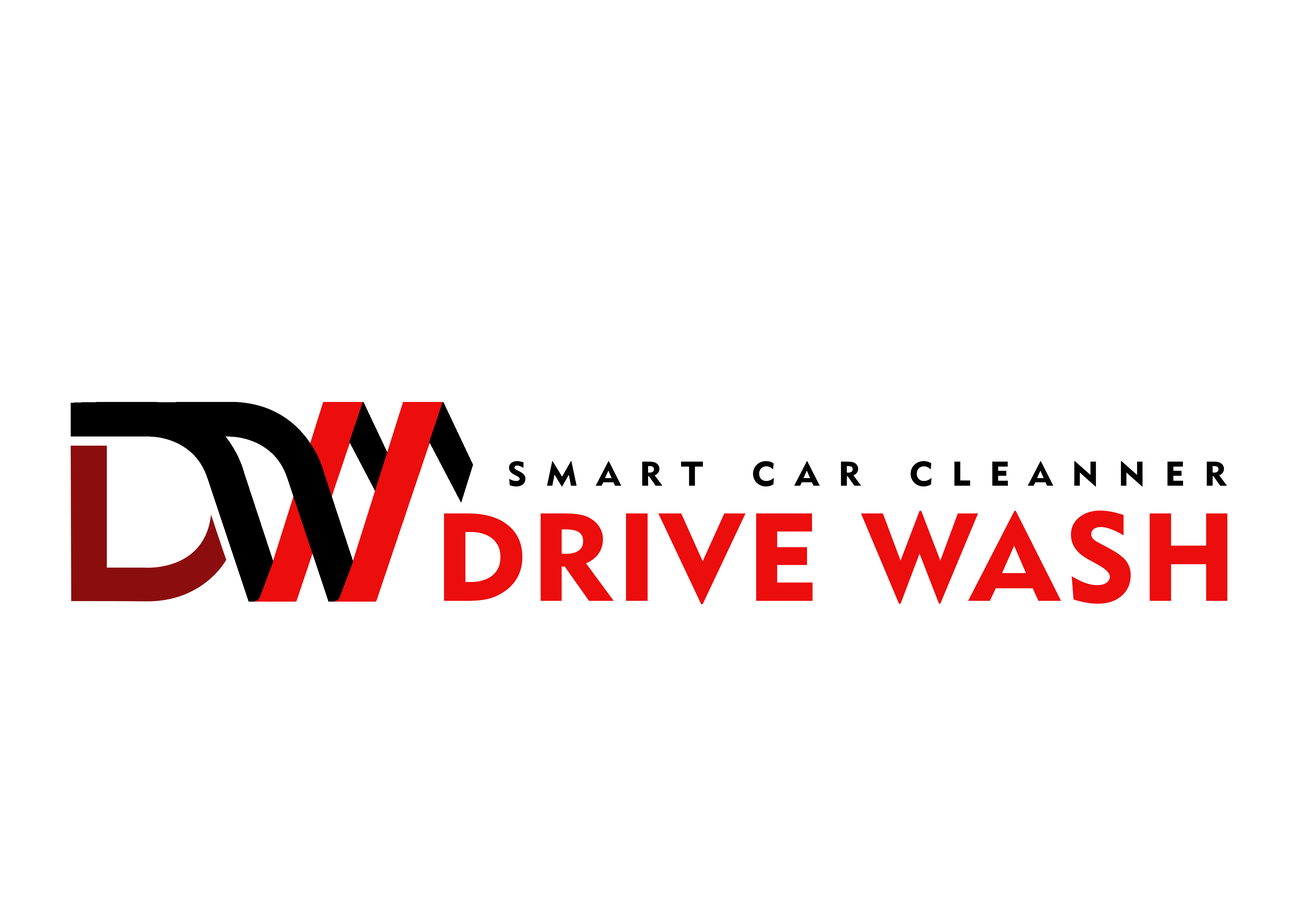
<style>
.page{position:relative;width:1299px;height:918px;background:#ffffff}
.page>*{position:absolute;margin:0}
.t1{font:33.9px "Geometric415BT-BlackA";letter-spacing:0.545em;color:#000000;scale:1.04 1}
.t2{font:123.3px "Geometric415BT-BlackA";letter-spacing:0.025em;color:#ec0d0d;scale:1.04 1}
</style>
<div class="page">
<p class="t1" style="left:509px;top:461px;width:718px;height:26px">SMART CAR CLEANNER</p>
<p class="t2" style="left:444px;top:511px;width:783px;height:93px">DRIVE WASH</p>
</div>
